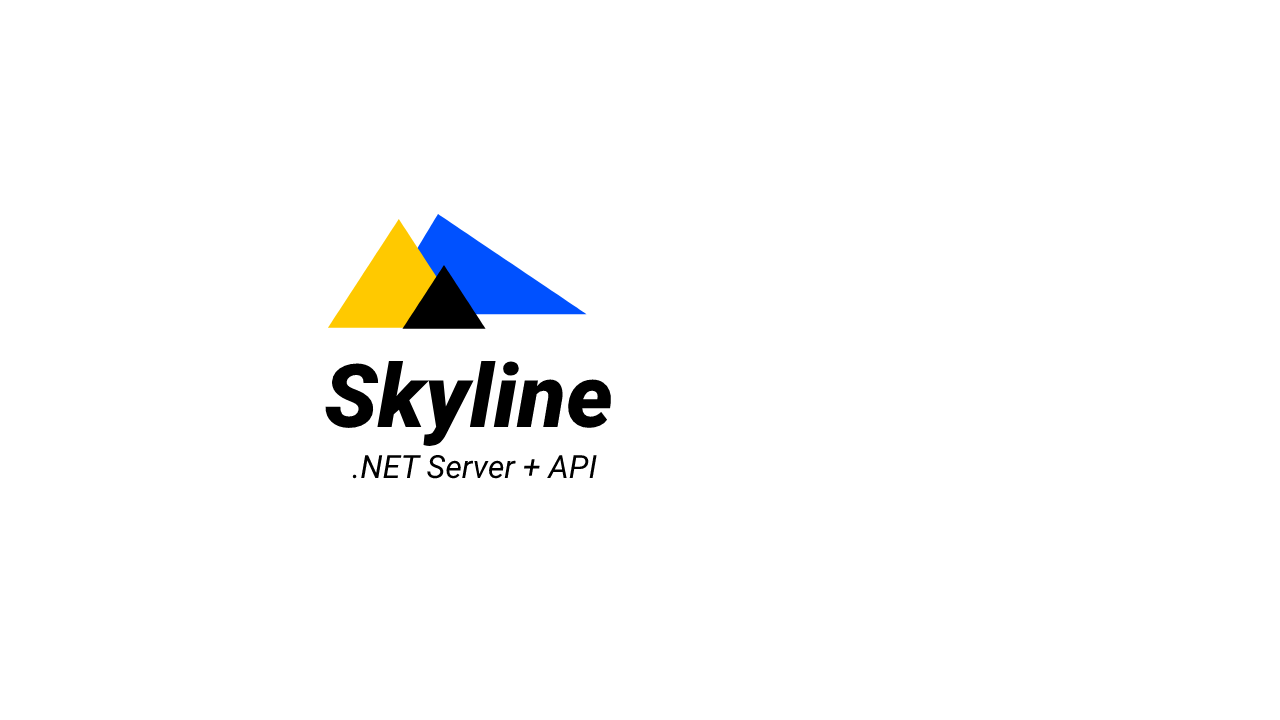
<style>
.page{position:relative;width:1280px;height:720px;background:#ffffff}
.page>*{position:absolute;margin:0}
.t1{font:88.1px "Roboto-BlackItalic";color:#000000}
.t2{font:32px "Roboto-Italic";color:#000000}
</style>
<div class="page">
<p class="t1" style="left:325px;top:360px;width:287px;height:86px">Skyline</p>
<p class="t2" style="left:352px;top:454px;width:245px;height:25px">.NET Server + API</p>
</div>
